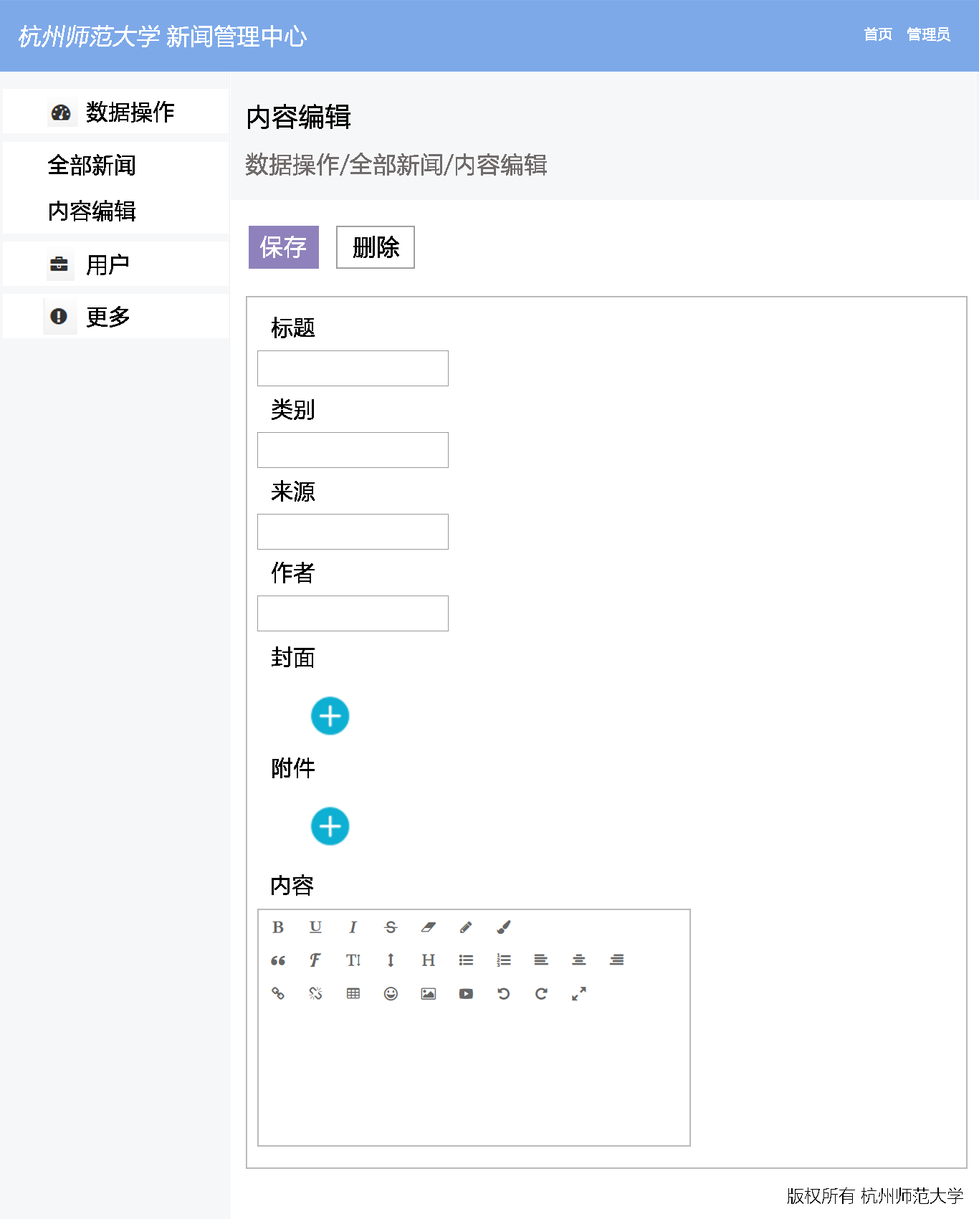
<style>
.page{position:relative;width:979px;height:1219px;background:#ffffff}
.page>*{position:absolute;margin:0}
.t1{font:22.9px "MicrosoftYaHeiLight";color:#ffffff;font-weight:bold;font-style:italic}
.t2{font:22.9px "MicrosoftYaHeiLight";color:#ffffff;font-weight:bold}
.t3{font:14.3px "MicrosoftYaHeiLight";color:#ffffff;font-weight:bold}
.t4{font:21.5px "MicrosoftYaHeiLight";color:#000000;font-weight:bold}
.t5{font:25.8px "MicrosoftYaHeiLight";color:#000000;font-weight:bold}
.t6{font:22.9px "MicrosoftYaHeiLight";color:#706b6b;font-weight:bold}
.t7{font:22.9px "MicrosoftYaHeiLight";color:#000000;font-weight:bold}
.t8{font:17.2px "MicrosoftYaHeiLight";color:#000000}
</style>
<div class="page">
<p class="t1" style="left:19px;top:25px;width:288px;height:22px">杭州师范大学 <span class="t2">新闻管理中心</span></p>
<p class="t3" style="left:864px;top:27px;width:86px;height:15px">首页   管理员</p>
<p class="t4" style="left:87px;top:101px;width:87px;height:21px">数据操作</p>
<p class="t5" style="left:248px;top:104px;width:102px;height:25px">内容编辑</p>
<p class="t4" style="left:48px;top:154px;width:87px;height:22px">全部新闻</p>
<p class="t6" style="left:246px;top:153px;width:301px;height:23px">数据操作/全部新闻/内容编辑</p>
<p class="t4" style="left:49px;top:200px;width:86px;height:21px">内容编辑</p>
<p class="t2" style="left:260px;top:236px;width:46px;height:22px">保存</p>
<p class="t7" style="left:353px;top:236px;width:46px;height:22px">删除</p>
<p class="t4" style="left:87px;top:254px;width:41px;height:21px">用户</p>
<p class="t4" style="left:87px;top:306px;width:42px;height:21px">更多</p>
<p class="t4" style="left:272px;top:317px;width:42px;height:21px">标题</p>
<p class="t4" style="left:272px;top:398px;width:42px;height:22px">类别</p>
<p class="t4" style="left:272px;top:480px;width:42px;height:21px">来源</p>
<p class="t4" style="left:272px;top:562px;width:42px;height:21px">作者</p>
<p class="t4" style="left:272px;top:646px;width:42px;height:22px">封面</p>
<p class="t4" style="left:272px;top:757px;width:42px;height:21px">附件</p>
<p class="t4" style="left:272px;top:874px;width:41px;height:21px">内容</p>
<p class="t8" style="left:787px;top:1187px;width:176px;height:17px">版权所有 杭州师范大学</p>
</div>
